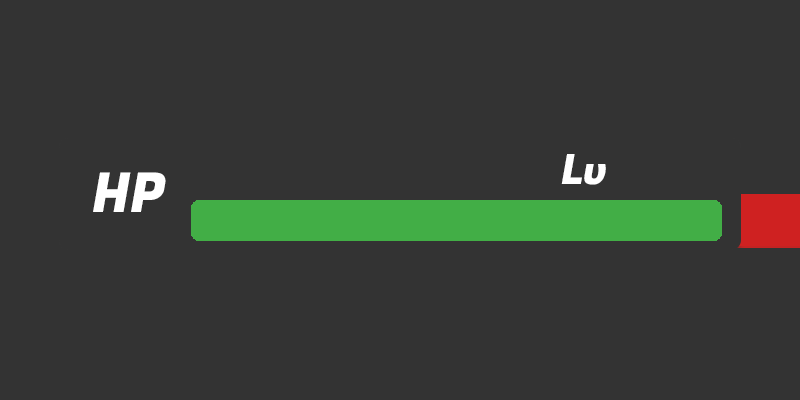
<style>
.page{position:relative;width:800px;height:400px;background:#333333}
.page>*{position:absolute;margin:0}
.t1{font:41.9px "FugazOne-Regular";color:#ffffff}
.t2{font:54.9px "FugazOne-Regular";color:#ffffff}
</style>
<div class="page">
<p class="t1" style="left:561px;top:154px;width:45px;height:31px">Lv</p>
<p class="t2" style="left:93px;top:172px;width:73px;height:40px">HP</p>
</div>
